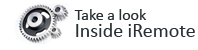
<style>
.page{position:relative;width:198px;height:50px;background:#ffffff}
.page>*{position:absolute;margin:0}
.t1{font:20px/17px "Calibri";color:#283033}
.t2{font:16px/17px "Calibri";color:#283033}
</style>
<div class="page">
<p class="t1" style="left:74px;top:9px;width:121px;height:28px"><span class="t2">Take a look <br></span>Inside iRemote</p>
</div>
